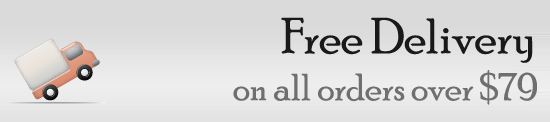
<style>
.page{position:relative;width:550px;height:122px}
.page>*{position:absolute;margin:0}
.t1{font:50px "PoorRichard-Regular";color:#191919}
.t2{font:38px "PoorRichard-Regular";color:#706e6e}
</style>
<div class="page">
<p class="t1" style="left:281px;top:17px;width:252px;height:46px">Free Delivery</p>
<p class="t2" style="left:233px;top:70px;width:304px;height:35px">on all orders over $79</p>
</div>
